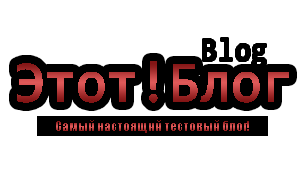
<style>
.page{position:relative;width:300px;height:179px;background:#ffffff}
.page>*{position:absolute;margin:0}
.t1{font:34px "Consolas-Bold";color:#000000;scale:0.86 1}
.t2{font:60px "Consolas-Bold";scale:0.94 1}
.t3{font:13px "Impact"}
</style>
<div class="page">
<p class="t1" style="left:203px;top:38px;width:63px;height:30px">Blog</p>
<p class="t2" style="left:17px;top:61px;width:272px;height:42px">Этот!Блог</p>
<p class="t3" style="left:56px;top:120px;width:193px;height:13px">Самый настоящий тестовый блог!</p>
</div>
